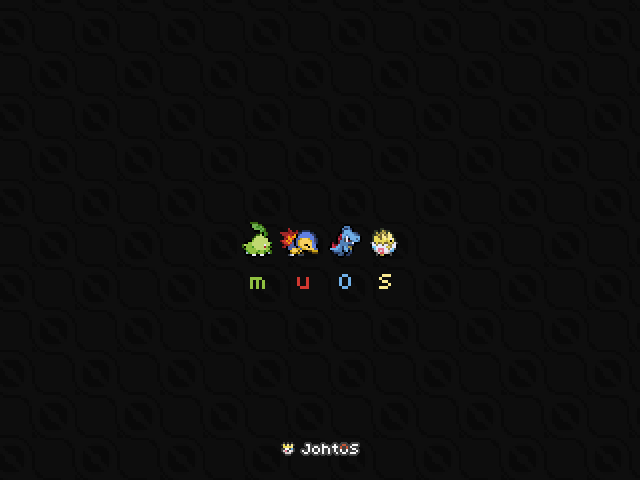
<style>
.page{position:relative;width:640px;height:480px;background:#0d0d0d}
.page>*{position:absolute;margin:0}
.t1{font:24px "04b03";color:#90c040}
.t2{font:24px "04b03";color:#d03830}
.t3{font:24px "04b03";color:#70b0e8}
.t4{font:24px "04b03";color:#f8e890}
</style>
<div class="page">
<p class="t1" style="left:250px;top:277px;width:15px;height:12px">m</p>
<p class="t2" style="left:297px;top:277px;width:12px;height:12px">u</p>
<p class="t3" style="left:339px;top:274px;width:12px;height:15px">O</p>
<p class="t4" style="left:379px;top:274px;width:12px;height:15px">S</p>
</div>
